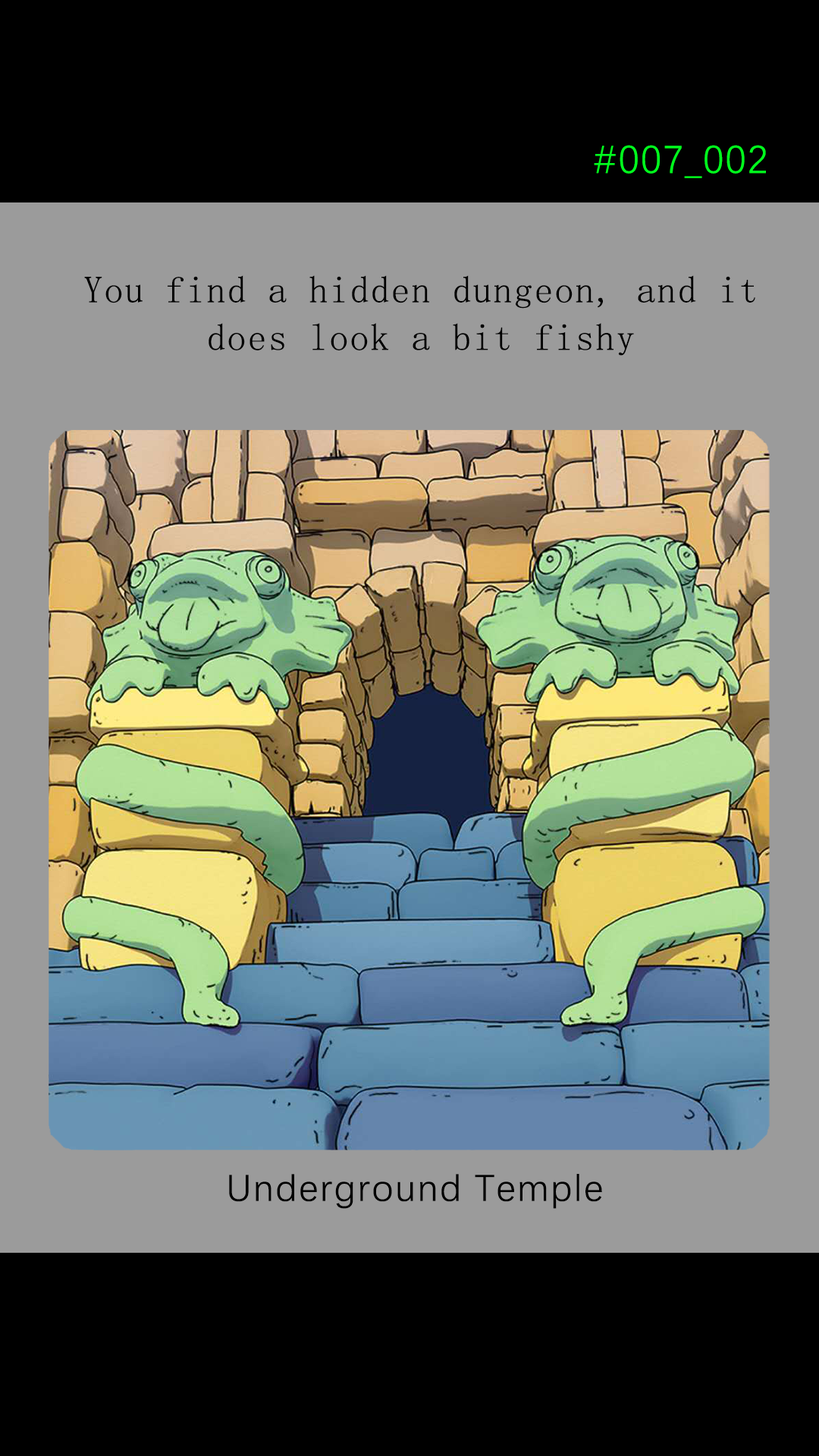
<style>
.page{position:relative;width:819px;height:1456px;background:#000000}
.page>*{position:absolute;margin:0}
.t1{font:39.2px "DengXian-Regular";letter-spacing:0.04em;color:#00ff1e}
.t2{font:37.9px/47.6px "SimSun";letter-spacing:0.04em;color:#000000}
.t3{font:37.9px "DengXian-Regular";letter-spacing:0.04em;color:#000000}
</style>
<div class="page">
<p class="t1" style="left:594px;top:145px;width:172px;height:33px">#007_002</p>
<p class="t2" style="left:84px;top:275px;width:671px;height:81px;text-align:center">You find a hidden dungeon, and it<br>does look a bit fishy</p>
<p class="t3" style="left:229px;top:1174px;width:373px;height:35px">Underground Temple</p>
</div>
